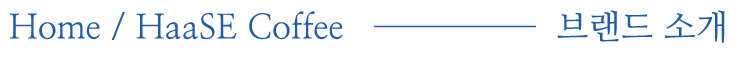
<style>
.page{position:relative;width:736px;height:58px;background:#ffffff}
.page>*{position:absolute;margin:0}
.t1{font:34px "NanumMyeongjo";color:#225ca5}
</style>
<div class="page">
<p class="t1" style="left:10px;top:10px;width:715px;height:33px">Home / HaaSE Coffee   ─────  브랜드 소개</p>
</div>
